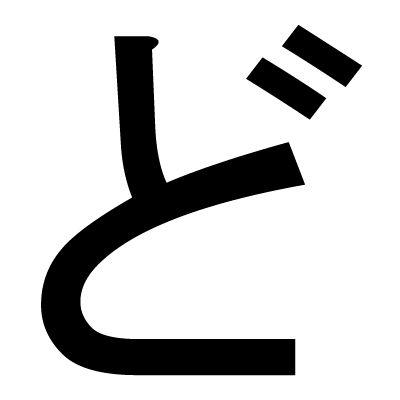
<style>
.page{position:relative;width:400px;height:400px;background:#ffffff}
.page>*{position:absolute;margin:0}
.t1{font:416.7px "MS-PGothic";color:#000000}
</style>
<div class="page">
<p class="t1" style="left:41px;top:25px;width:321px;height:351px">ど</p>
</div>
